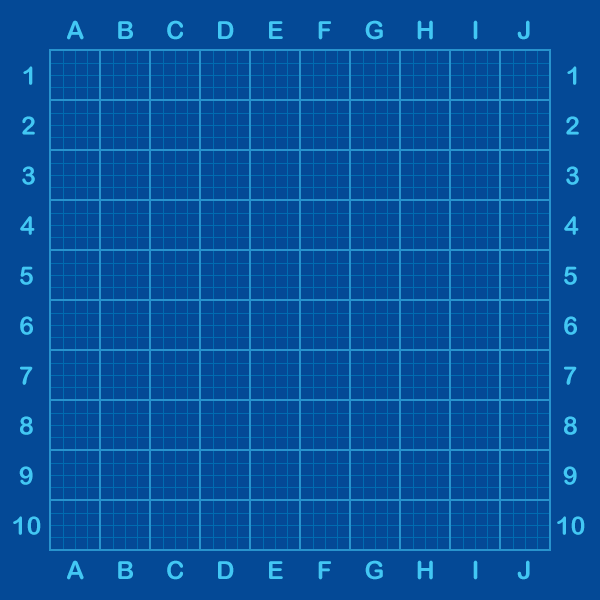
<style>
.page{position:relative;width:600px;height:600px;background:#044996}
.page>*{position:absolute;margin:0}
.t1{font:25px "ArialRoundedMTBold";color:#42c7f4}
</style>
<div class="page">
<p class="t1" style="left:67px;top:20px;width:17px;height:20px">A</p>
<p class="t1" style="left:118px;top:21px;width:15px;height:18px">B</p>
<p class="t1" style="left:167px;top:20px;width:16px;height:20px">C</p>
<p class="t1" style="left:218px;top:21px;width:16px;height:18px">D</p>
<p class="t1" style="left:269px;top:21px;width:14px;height:18px">E</p>
<p class="t1" style="left:318px;top:21px;width:13px;height:19px">F</p>
<p class="t1" style="left:365px;top:20px;width:18px;height:20px">G</p>
<p class="t1" style="left:417px;top:20px;width:16px;height:20px">H</p>
<p class="t1" style="left:473px;top:20px;width:5px;height:20px">I</p>
<p class="t1" style="left:517px;top:20px;width:13px;height:20px">J</p>
<p class="t1" style="left:23px;top:66px;width:10px;height:19px">1</p>
<p class="t1" style="left:567px;top:66px;width:10px;height:19px">1</p>
<p class="t1" style="left:22px;top:116px;width:13px;height:19px">2</p>
<p class="t1" style="left:566px;top:116px;width:13px;height:19px">2</p>
<p class="t1" style="left:22px;top:166px;width:13px;height:19px">3</p>
<p class="t1" style="left:566px;top:166px;width:13px;height:19px">3</p>
<p class="t1" style="left:20px;top:216px;width:15px;height:19px">4</p>
<p class="t1" style="left:564px;top:216px;width:15px;height:19px">4</p>
<p class="t1" style="left:20px;top:266px;width:13px;height:19px">5</p>
<p class="t1" style="left:564px;top:266px;width:13px;height:19px">5</p>
<p class="t1" style="left:20px;top:316px;width:13px;height:19px">6</p>
<p class="t1" style="left:564px;top:316px;width:13px;height:19px">6</p>
<p class="t1" style="left:20px;top:366px;width:13px;height:19px">7</p>
<p class="t1" style="left:564px;top:366px;width:13px;height:19px">7</p>
<p class="t1" style="left:20px;top:416px;width:13px;height:19px">8</p>
<p class="t1" style="left:564px;top:416px;width:13px;height:19px">8</p>
<p class="t1" style="left:19px;top:466px;width:14px;height:19px">9</p>
<p class="t1" style="left:563px;top:466px;width:14px;height:19px">9</p>
<p class="t1" style="left:13px;top:516px;width:28px;height:19px">10</p>
<p class="t1" style="left:557px;top:516px;width:28px;height:19px">10</p>
<p class="t1" style="left:67px;top:560px;width:17px;height:20px">A</p>
<p class="t1" style="left:118px;top:561px;width:15px;height:18px">B</p>
<p class="t1" style="left:167px;top:560px;width:16px;height:20px">C</p>
<p class="t1" style="left:218px;top:561px;width:16px;height:18px">D</p>
<p class="t1" style="left:269px;top:561px;width:14px;height:18px">E</p>
<p class="t1" style="left:318px;top:561px;width:13px;height:19px">F</p>
<p class="t1" style="left:365px;top:560px;width:18px;height:20px">G</p>
<p class="t1" style="left:417px;top:560px;width:16px;height:20px">H</p>
<p class="t1" style="left:473px;top:560px;width:5px;height:20px">I</p>
<p class="t1" style="left:517px;top:560px;width:13px;height:20px">J</p>
</div>
